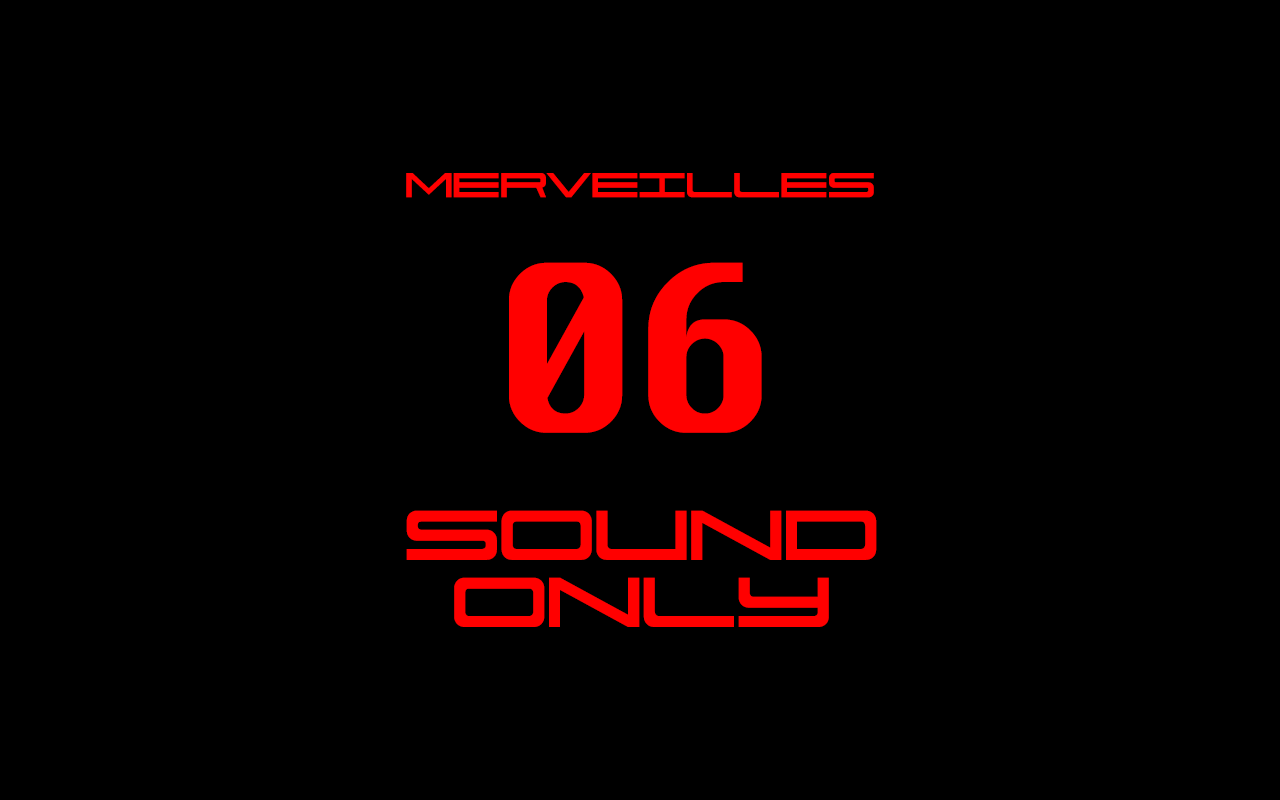
<style>
.page{position:relative;width:1280px;height:800px;background:#000000}
.page>*{position:absolute;margin:0}
.t1{font:50.3px "911Porscha";letter-spacing:-0.05em;color:#ff0000;text-transform:uppercase}
.t2{font:226.2px "Krungthep";letter-spacing:-0.05em;color:#ff0000;text-transform:uppercase}
.t3{font:100.9px/67.1px "911Porscha";letter-spacing:-0.05em;color:#ff0000;text-transform:uppercase}
</style>
<div class="page">
<p class="t1" style="left:406px;top:173px;width:468px;height:25px">MERVEILLES</p>
<p class="t2" style="left:509px;top:262px;width:253px;height:171px">06</p>
<p class="t3" style="left:406px;top:510px;width:471px;height:117px;text-align:center">SOUND<br>ONLY</p>
</div>
